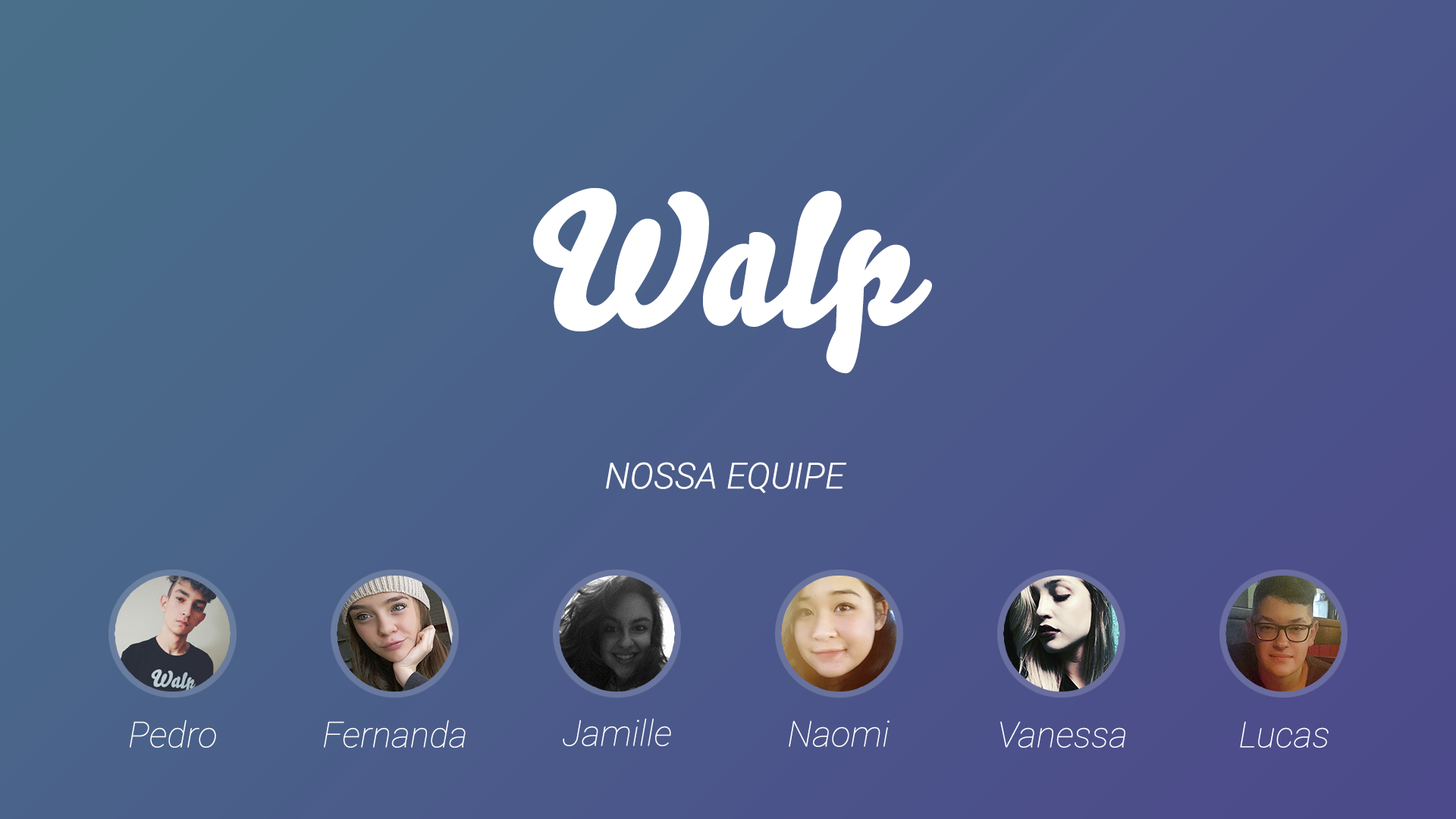
<style>
.page{position:relative;width:1456px;height:819px}
.page>*{position:absolute;margin:0}
.t1{font:184.1px "Bello-Pro";color:#ffffff}
.t2{font:36.2px "Roboto-LightItalic";color:#ffffff}
.t3{font:35.8px "Roboto-ThinItalic";color:#ffffff}
</style>
<div class="page">
<p class="t1" style="left:533px;top:187px;width:399px;height:187px">Walp</p>
<p class="t2" style="left:606px;top:462px;width:240px;height:32px">NOSSA EQUIPE</p>
<p class="t3" style="left:130px;top:720px;width:86px;height:28px">Pedro</p>
<p class="t3" style="left:324px;top:720px;width:142px;height:28px">Fernanda</p>
<p class="t3" style="left:563px;top:718px;width:108px;height:28px">Jamille</p>
<p class="t3" style="left:789px;top:720px;width:101px;height:27px">Naomi</p>
<p class="t3" style="left:1000px;top:721px;width:125px;height:27px">Vanessa</p>
<p class="t3" style="left:1240px;top:721px;width:89px;height:27px">Lucas</p>
</div>
